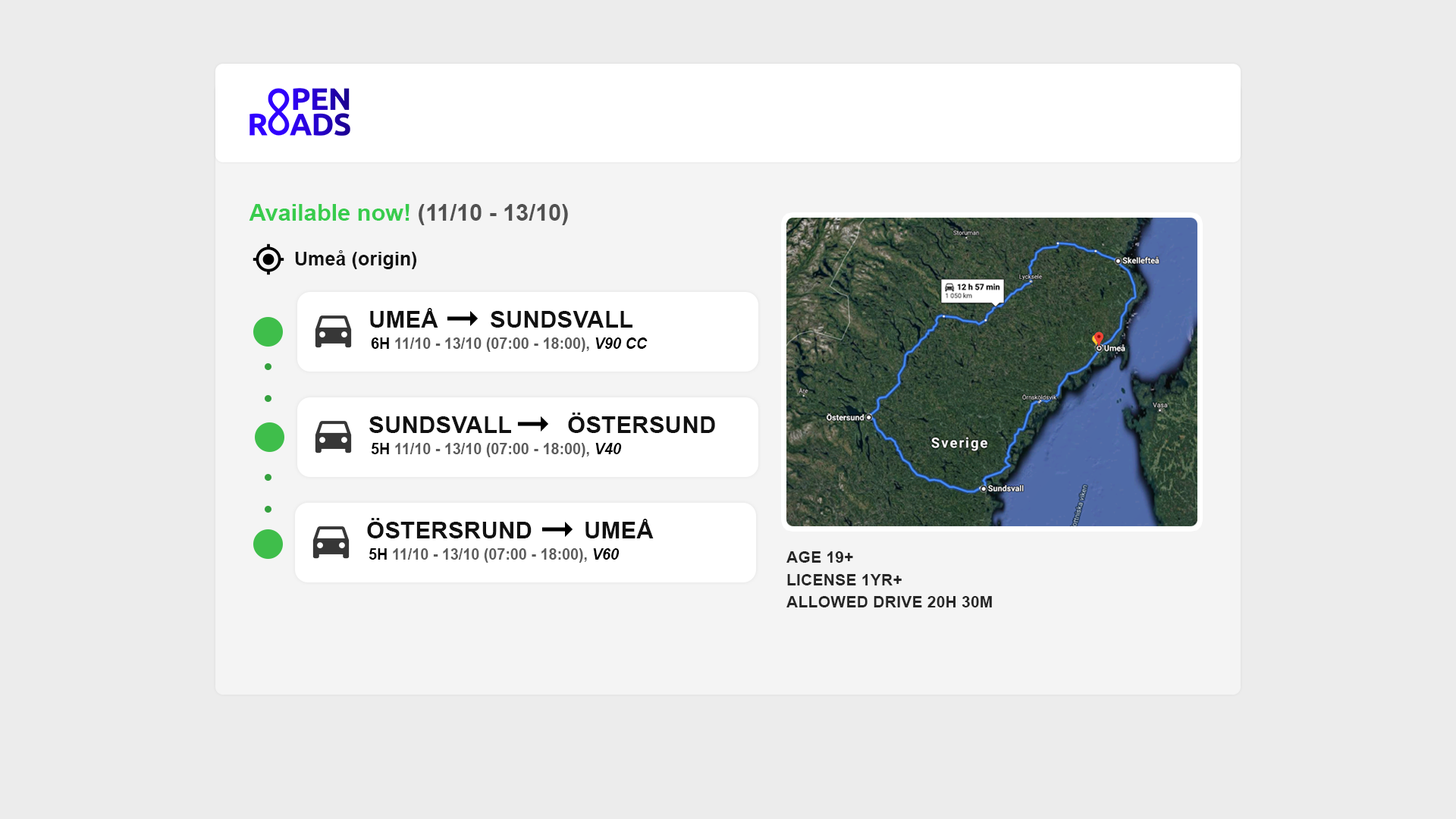
<style>
.page{position:relative;width:1456px;height:819px;background:#ececec}
.page>*{position:absolute;margin:0}
.t1{font:23.3px "Arial-BoldMT";color:#515151}
.t2{font:23.3px "Arial-BoldMT";color:#38cc4d}
.t3{font:19.2px "Arial-BoldMT";color:#111111}
.t4{font:23.8px "Arial-BoldMT";color:#111111}
.t5{font:15px "Arial-BoldMT";color:#5c5c5c}
.t6{font:15px "Arial-BoldMT";color:#000000}
.t7{font:15px "Arial-BoldItalicMT";color:#000000}
.t8{font:16.3px/22.4px "Arial-BoldMT";color:#262626}
</style>
<div class="page">
<p class="t1" style="left:249px;top:204px;width:319px;height:21px"><span class="t2">Available now! </span>(11/10 - 13/10)</p>
<p class="t3" style="left:295px;top:250px;width:121px;height:19px">Umeå (origin)</p>
<p class="t4" style="left:370px;top:308px;width:68px;height:20px">UMEÅ</p>
<p class="t4" style="left:491px;top:311px;width:141px;height:17px">SUNDSVALL</p>
<p class="t5" style="left:371px;top:337px;width:277px;height:15px"><span class="t6">6H </span>11/10 - 13/10 (07:00 - 18:00), <span class="t7">V90 CC</span></p>
<p class="t4" style="left:568px;top:413px;width:147px;height:20px">ÖSTERSUND</p>
<p class="t4" style="left:369px;top:416px;width:142px;height:17px">SUNDSVALL</p>
<p class="t5" style="left:371px;top:443px;width:251px;height:14px"><span class="t6">5H </span>11/10 - 13/10 (07:00 - 18:00), <span class="t7">V40</span></p>
<p class="t4" style="left:367px;top:518px;width:165px;height:20px">ÖSTERSRUND</p>
<p class="t4" style="left:585px;top:519px;width:69px;height:19px">UMEÅ</p>
<p class="t5" style="left:369px;top:548px;width:251px;height:15px"><span class="t6">5H </span>11/10 - 13/10 (07:00 - 18:00), <span class="t7">V60</span></p>
<p class="t8" style="left:786px;top:551px;width:206px;height:56px">AGE 19+<br>LICENSE 1YR+<br>ALLOWED DRIVE 20H 30M</p>
</div>
